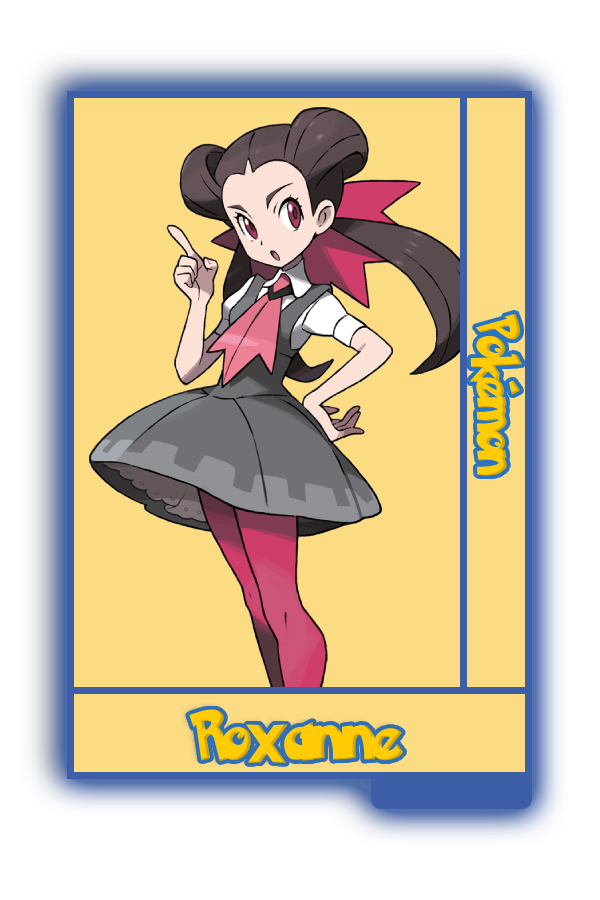
<style>
.page{position:relative;width:600px;height:900px;background:#fbdc83}
.page>*{position:absolute;margin:0}
.t1{font:48.8px "PokemonSolidNormal";color:#ffcb05;scale:0.8 1}
.t2{font:56.6px "PokemonSolidNormal";color:#ffcb05;scale:0.92 1}
</style>
<div class="page">
<p class="t1" style="left:469px;top:313px;width:54px;height:163px;rotate:90deg">Pokémon</p>
<p class="t2" style="left:189px;top:709px;width:215px;height:54px">Roxanne</p>
</div>
